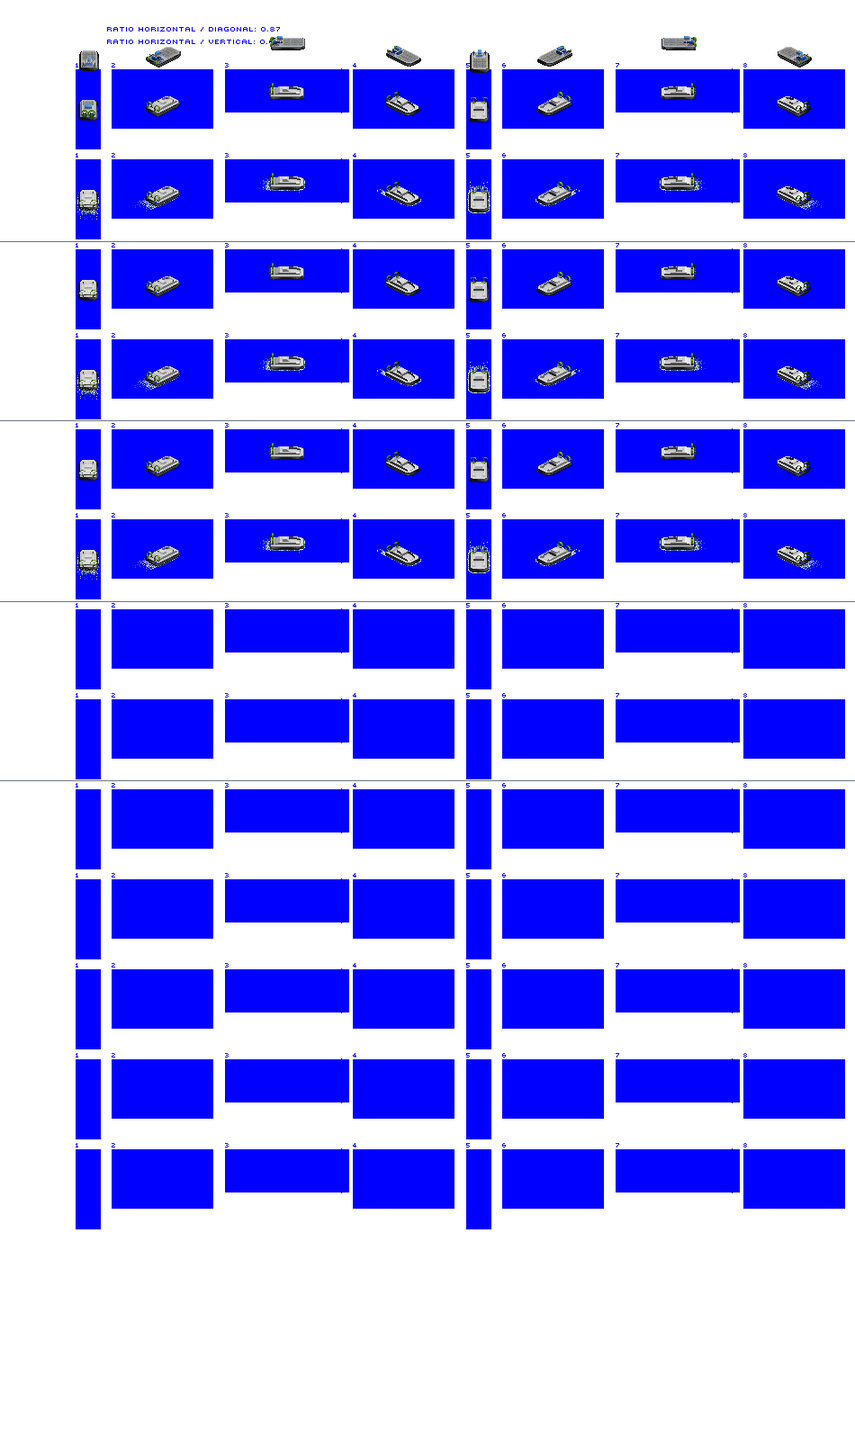
<style>
.page{position:relative;width:855px;height:1440px;background:#ffffff}
.page>*{position:absolute;margin:0}
.t1{font:9px/12.6px "Mini7";color:#0000ff}
</style>
<div class="page">
<p class="t1" style="left:107px;top:27px;width:173px;height:17px">ratio horizontal / diagonal: 0.87<br>Ratio horizontal / vertical: 0.69</p>
</div>
